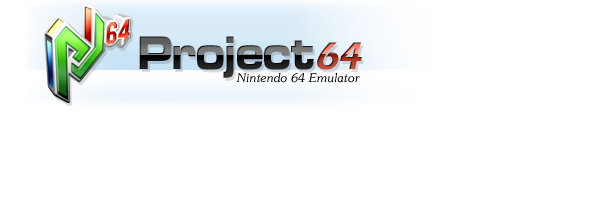
<style>
.page{position:relative;width:600px;height:200px;background:#ffffff}
.page>*{position:absolute;margin:0}
.t1{font:48.8px "MicrogrammaD-BoldExte";scale:0.81 1}
.t2{font:39.7px "Crillee"}
.t3{font:12px "Souvenir-Light-Italic";color:#000000}
</style>
<div class="page">
<p class="t1" style="left:139px;top:36px;width:175px;height:42px">Project</p>
<p class="t2" style="left:317px;top:42px;width:45px;height:28px">64</p>
<p class="t3" style="left:236px;top:72px;width:124px;height:11px">Nintendo 64 Emulator</p>
</div>
